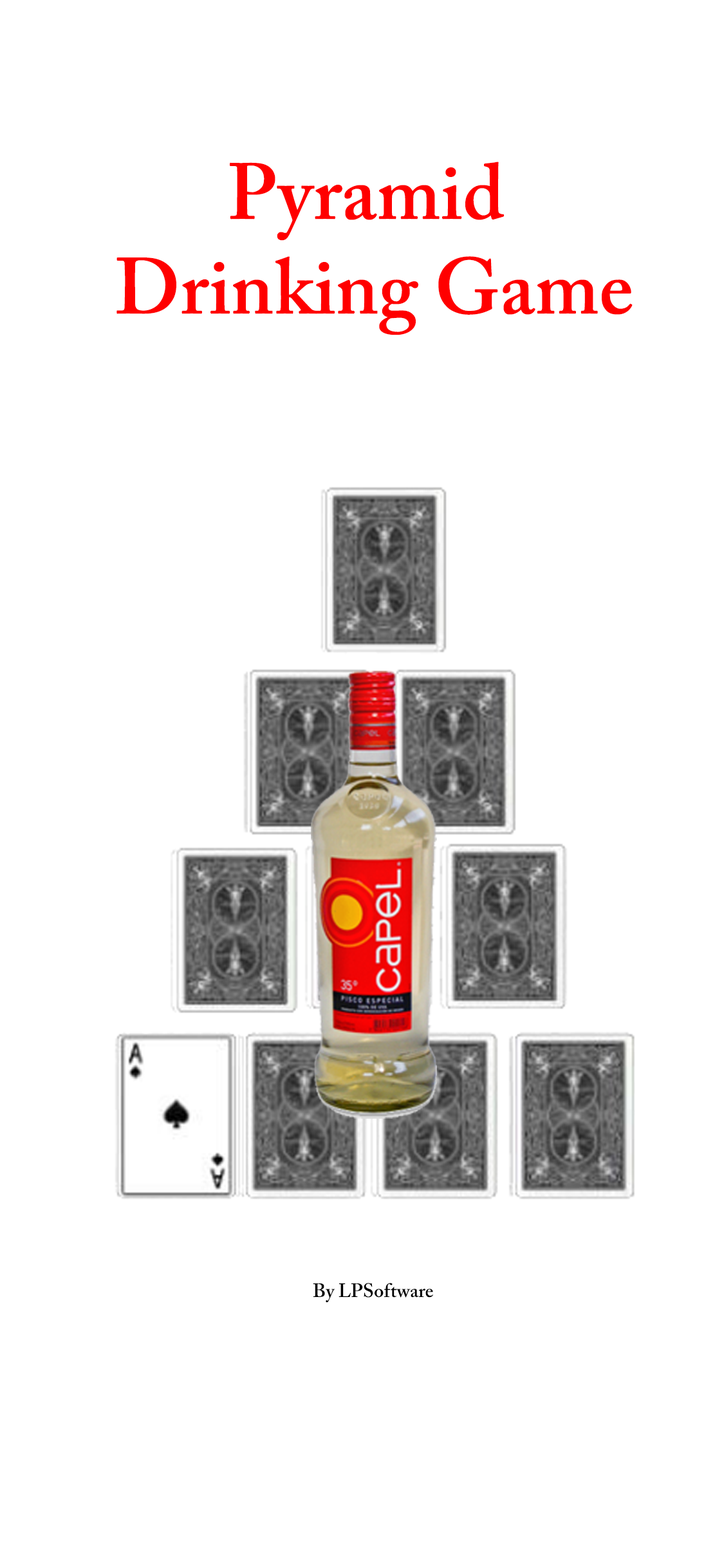
<style>
.page{position:relative;width:724px;height:1568px;background:#ffffff}
.page>*{position:absolute;margin:0}
.t1{font:78.9px "ACaslonPro-Semibold";color:#ff0000}
.t2{font:19.3px "ACaslonPro-Semibold";color:#000000}
</style>
<div class="page">
<p class="t1" style="left:117px;top:162px;width:516px;height:173px;text-align:center">Pyramid <br>Drinking Game</p>
<p class="t2" style="left:313px;top:1283px;width:120px;height:20px">By LPSoftware</p>
</div>
